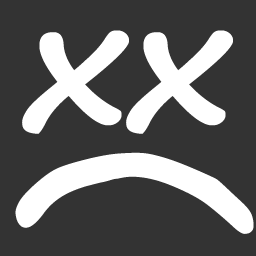
<style>
.page{position:relative;width:256px;height:256px;background:#333333}
.page>*{position:absolute;margin:0}
.t1{font:168.9px "SegoePrint-Bold";color:#ffffff;scale:1.15 1}
.t2{font:233.3px "SegoePrint-Bold";color:#ffffff}
</style>
<div class="page">
<p class="t1" style="left:22px;top:30px;width:211px;height:104px">xx</p>
<p class="t2" style="left:15px;top:152px;width:239px;height:82px;rotate:86deg">(</p>
</div>
